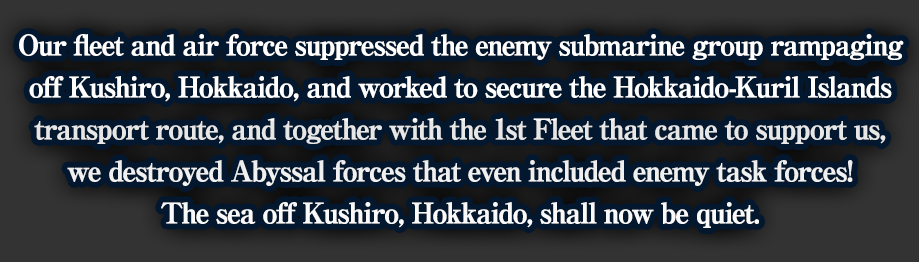
<style>
.page{position:relative;width:919px;height:262px;background:#03172f}
.page>*{position:absolute;margin:0}
.t1{font:28px/42px "RyuminPro-ExBold";letter-spacing:-0.08em;color:#ffffff;font-weight:bold}
</style>
<div class="page">
<p class="t1" style="left:19px;top:34px;width:885px;height:194px;text-align:center">Our fleet and air force suppressed the enemy submarine group rampaging<br>off Kushiro, Hokkaido, and worked to secure the Hokkaido-Kuril Islands<br>transport route, and together with the 1st Fleet that came to support us,<br>we destroyed Abyssal forces that even included enemy task forces!<br>The sea off Kushiro, Hokkaido, shall now be quiet.</p>
</div>
